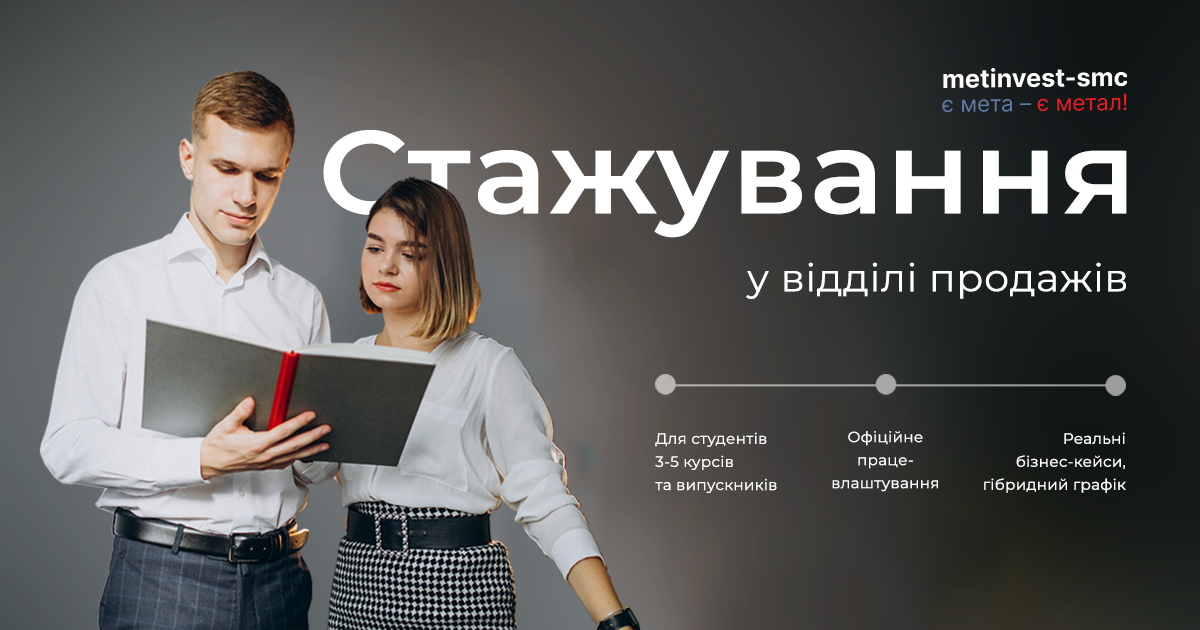
<style>
.page{position:relative;width:1200px;height:630px}
.page>*{position:absolute;margin:0}
.t1{font:117.5px "Montserrat-SemiBold";letter-spacing:0.015em;color:#ffffff;scale:1.06 1}
.t2{font:38.4px "Montserrat-Regular";letter-spacing:0.015em;color:#ffffff;scale:1.03 1}
.t3{font:15px/23.1px "Montserrat-Regular";letter-spacing:0.015em;color:#ffffff}
.t4{font:14.9px/23px "Montserrat-Regular";letter-spacing:0.015em;color:#ffffff}
</style>
<div class="page">
<p class="t1" style="left:323px;top:130px;width:804px;height:108px">Стажування</p>
<p class="t2" style="left:746px;top:262px;width:380px;height:37px">у відділі продажів</p>
<p class="t3" style="left:655px;top:432px;width:122px;height:62px">Для студентів<br>3-5 курсів<br>та випускників</p>
<p class="t4" style="left:832px;top:431px;width:106px;height:61px;text-align:center">Офіційне<br>праце-<br>влаштування</p>
<p class="t4" style="left:984px;top:432px;width:142px;height:61px;text-align:right">Реальні<br>бізнес-кейси,<br>гібридний графік</p>
</div>
